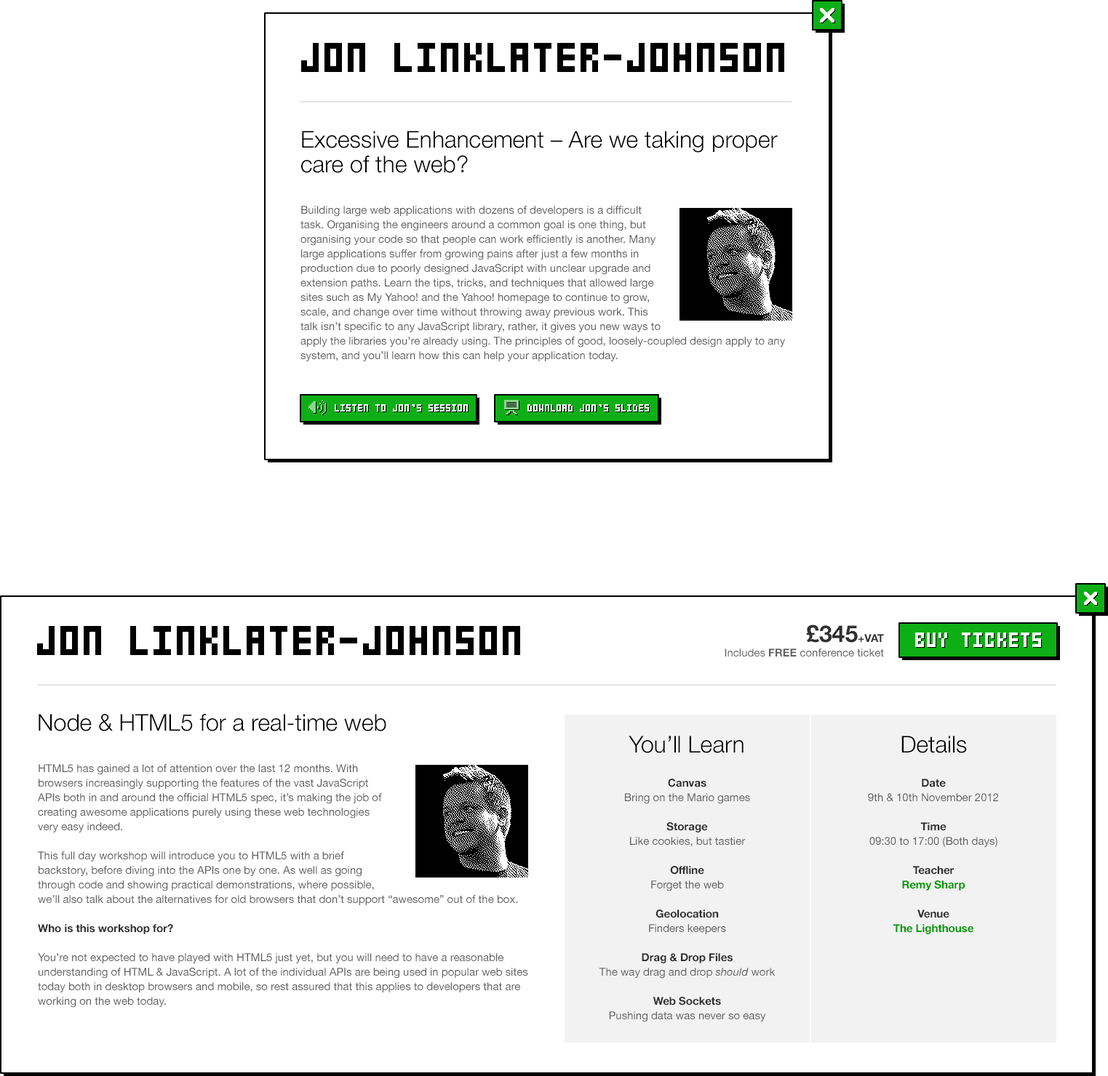
<style>
.page{position:relative;width:1108px;height:1076px;background:#ffffff}
.page>*{position:absolute;margin:0}
.t1{font:23.3px/24.7px "HelveticaNeue-Light";color:#000000}
.t2{font:11.6px "Xenon2";color:#ffffff}
.t3{font:10.9px/14.5px "HelveticaNeue";color:#606060}
.t4{font:23.3px/32.7px "HelveticaNeue-Bold";color:#303030}
.t5{font:10.9px/32.7px "HelveticaNeue-Bold";color:#303030}
.t6{font:10.9px/14.5px "HelveticaNeue-Bold";color:#606060}
.t7{font:23.3px "HelveticaNeue-Light";color:#000000}
.t8{font:10.9px/14.5px "HelveticaNeue-Bold";color:#303030}
.t9{font:10.9px/14.5px "HelveticaNeue-Italic";color:#606060}
.t10{font:10.9px/14.5px "HelveticaNeue-Bold";color:#009900}
</style>
<div class="page">
<p class="t1" style="left:301px;top:131px;width:477px;height:42px">Excessive Enhancement – Are we taking proper care of the web?</p>
<p class="t2" style="left:335px;top:404px;width:133px;height:8px">LISTEN TO JON’s SESSION</p>
<p class="t2" style="left:527px;top:404px;width:122px;height:8px">DOWNLOAD JON’s SLIDES</p>
<p class="t3" style="left:724px;top:625px;width:160px;height:32px;text-align:right"><span class="t4">£345</span><span class="t5">+VAT<br></span>Includes <span class="t6">FREE</span> conference ticket</p>
<p class="t7" style="left:39px;top:714px;width:347px;height:18px">Node &amp; HTML5 for a real-time web</p>
<p class="t7" style="left:628px;top:736px;width:115px;height:18px">You’ll Learn</p>
<p class="t7" style="left:901px;top:736px;width:66px;height:18px">Details</p>
<p class="t3" style="left:38px;top:764px;width:490px;height:244px">HTML5 has gained a lot of attention over the last 12 months. With <br>browsers increasingly supporting the features of the vast JavaScript <br>APIs both in and around the official HTML5 spec, it’s making the job of <br>creating awesome applications purely using these web technologies <br>very easy indeed.<br><br>This full day workshop will introduce you to HTML5 with a brief<br>backstory, before diving into the APIs one by one. As well as going <br>through code and showing practical demonstrations, where possible, <br>we’ll also talk about the alternatives for old browsers that don’t support “awesome” out of the box.<br><br><span class="t8">Who is this workshop for?<br></span><br>You’re not expected to have played with HTML5 just yet, but you will need to have a reasonable understanding of HTML &amp; JavaScript. A lot of the individual APIs are being used in popular web sites today both in desktop browsers and mobile, so rest assured that this applies to developers that are working on the web today.</p>
<p class="t3" style="left:599px;top:779px;width:176px;height:244px;text-align:center"><span class="t8">Canvas<br></span>Bring on the Mario games<br><br><span class="t8">Storage<br></span>Like cookies, but tastier<br><br><span class="t8">Offline<br></span>Forget the web<br><br><span class="t8">Geolocation<br></span>Finders keepers<br><br><span class="t8">Drag &amp; Drop Files<br></span>The way drag and drop <span class="t9">should </span>work<br><br><span class="t8">Web Sockets<br></span>Pushing data was never so easy</p>
<p class="t3" style="left:868px;top:779px;width:130px;height:156px;text-align:center"><span class="t8">Date<br></span>9th &amp; 10th November 2012<br><br><span class="t8">Time<br></span>09:30 to 17:00 (Both days)<br><br><span class="t8">Teacher<br></span><span class="t10">Remy Sharp<br><br></span><span class="t8">Venue<br></span><span class="t10">The Lighthouse</span></p>
</div>
